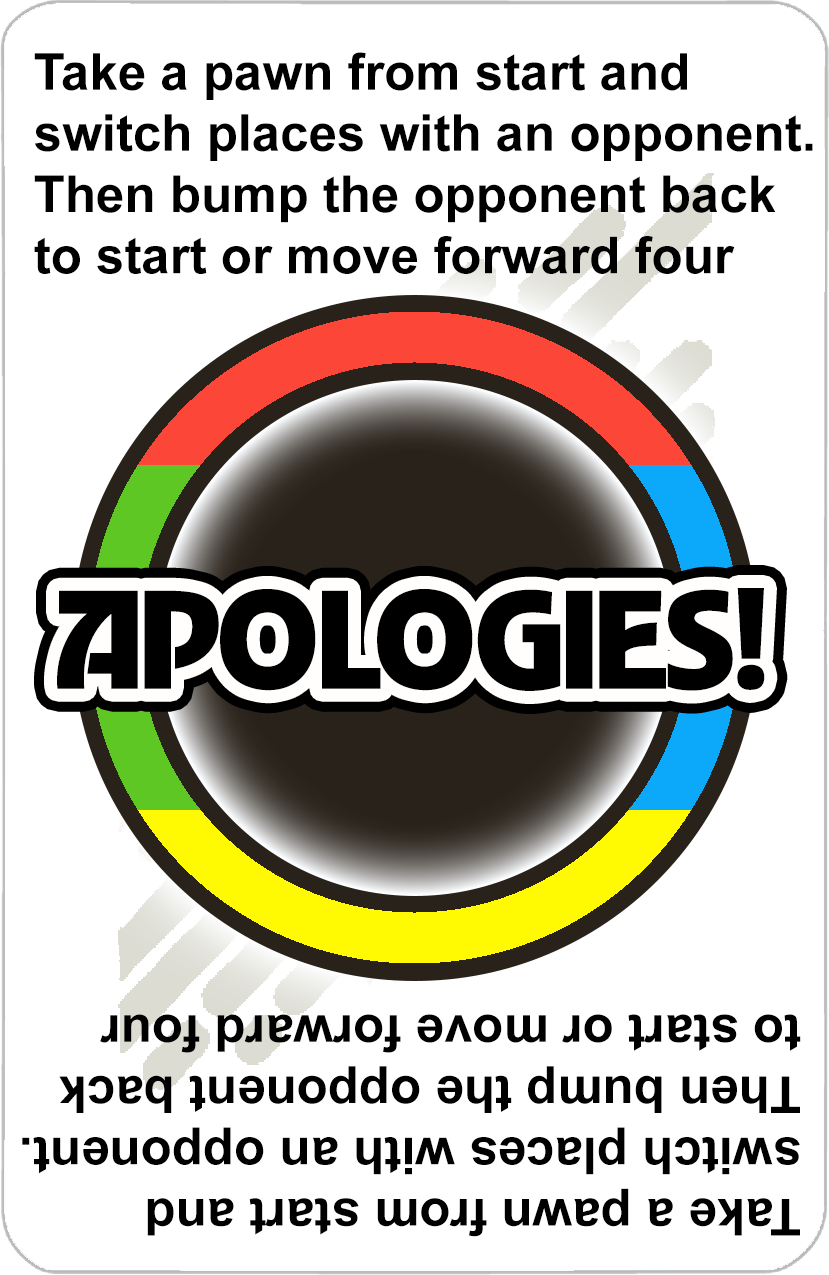
<style>
.page{position:relative;width:829px;height:1275px;background:#ffffff}
.page>*{position:absolute;margin:0}
.t1{font:51px "Arial-BoldMT";color:#000000}
.t2{font:158.1px "AdGothic-Regular";color:#000000}
</style>
<div class="page">
<p class="t1" style="left:34px;top:52px;width:779px;height:222px">Take a pawn from start and <br>switch places with an opponent.<br>Then bump the opponent back <br>to start or move forward four</p>
<p class="t2" style="left:57px;top:588px;width:708px;height:103px">APOLOGIES!</p>
<p class="t1" style="left:22px;top:1014px;width:779px;height:223px;rotate:180deg">Take a pawn from start and <br>switch places with an opponent.<br>Then bump the opponent back <br>to start or move forward four</p>
</div>
